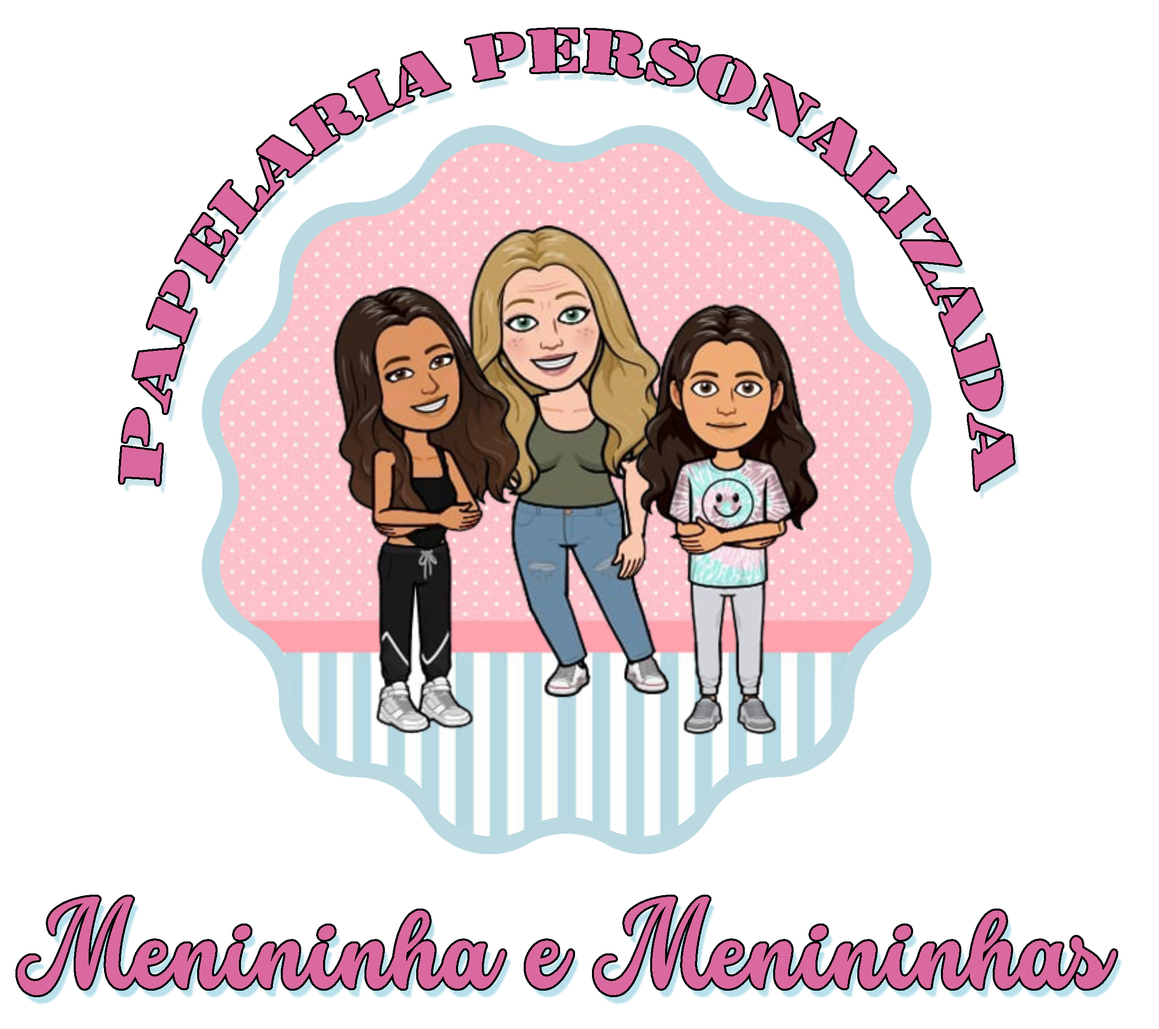
<style>
.page{position:relative;width:1159px;height:1029px;background:#ffffff}
.page>*{position:absolute;margin:0}
.t1{font:102.3px "Stars&Love-BottomHeavy";color:#da699f;scale:0.96 1}
</style>
<div class="page">
<p class="t1" style="left:17px;top:897px;width:1099px;height:98px">Menininha e Menininhas</p>
</div>
